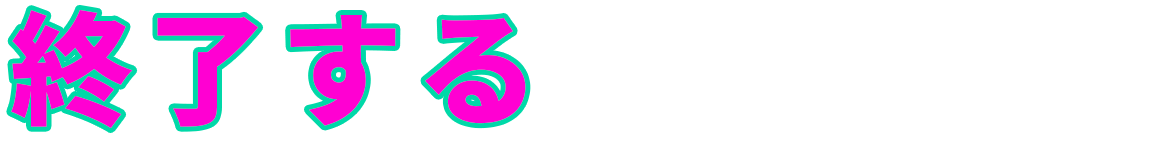
<style>
.page{position:relative;width:1149px;height:141px;background:#ffffff}
.page>*{position:absolute;margin:0}
.t1{font:122.8px "NotoSansJP-Black";letter-spacing:0.1em;color:#ff00d2}
</style>
<div class="page">
<p class="t1" style="left:11px;top:9px;width:515px;height:120px">終了する</p>
</div>
